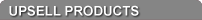
<style>
.page{position:relative;width:202px;height:20px;background:#858585}
.page>*{position:absolute;margin:0}
.t1{font:13.3px "Arial-BoldMT";color:#ffffff}
</style>
<div class="page">
<p class="t1" style="left:9px;top:5px;width:130px;height:11px">UPSELL PRODUCTS</p>
</div>
